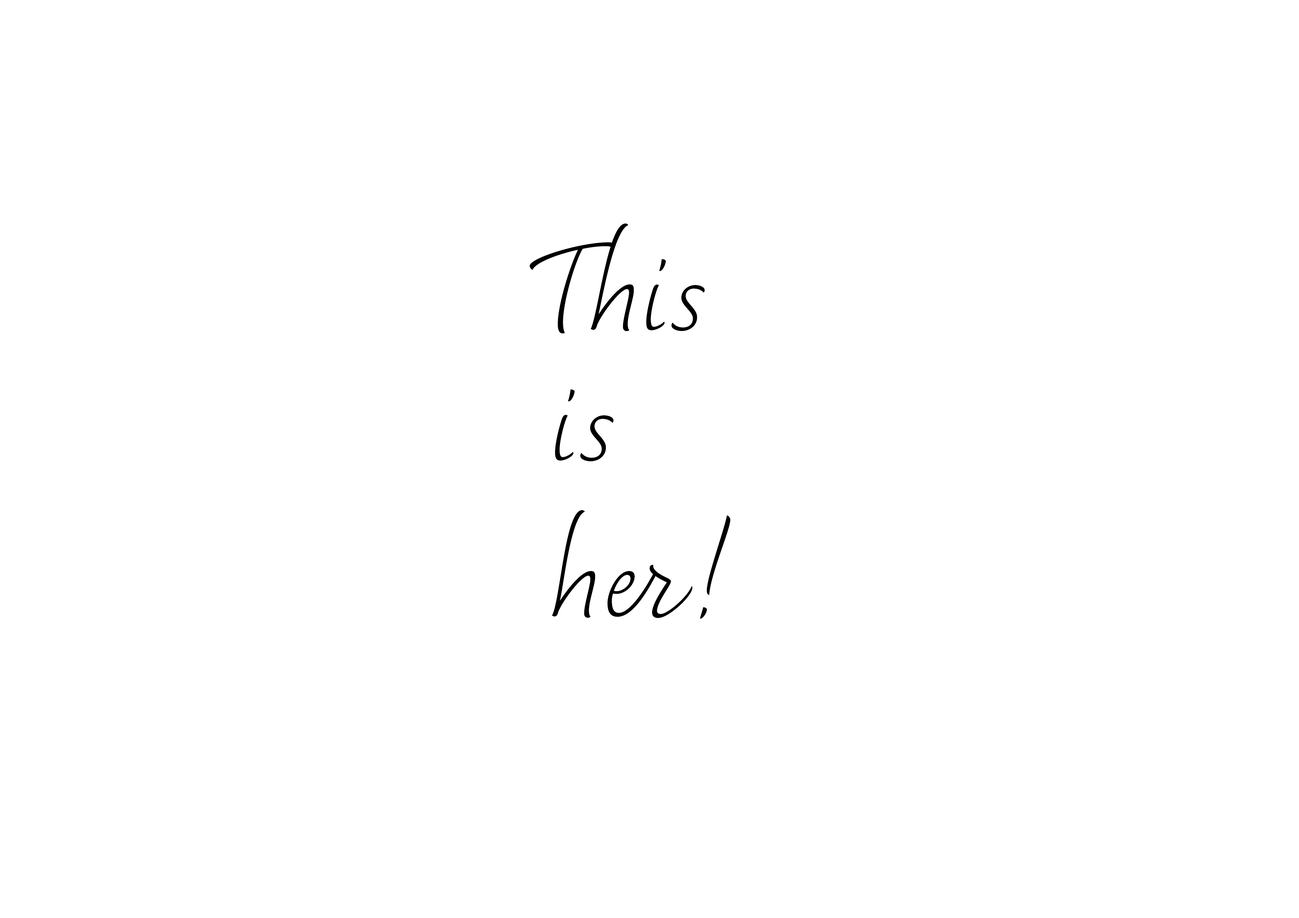
<style>
.page{position:relative;width:1299px;height:918px;background:#ffffff}
.page>*{position:absolute;margin:0}
.t1{font:154.3px/26.1px "Dolce-Thin";color:#000000}
</style>
<div class="page">
<p class="t1" style="left:529px;top:223px;width:201px;height:396px">This<br><br><br><br><br>is<br><br><br><br><br><br>her!</p>
</div>
